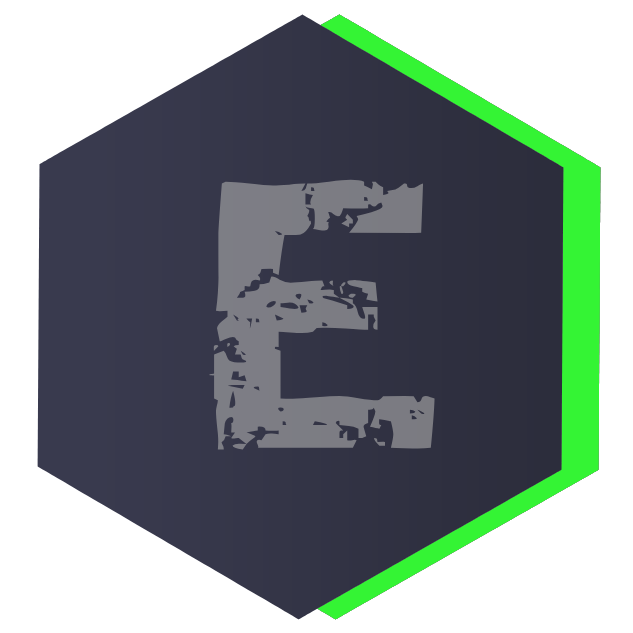
<style>
.page{position:relative;width:633px;height:633px;background:#ffffff}
.page>*{position:absolute;margin:0}
.t1{font:267.9px "Destroy";color:#7d7d84}
</style>
<div class="page">
<p class="t1" style="left:209px;top:179px;width:226px;height:271px">E</p>
</div>
